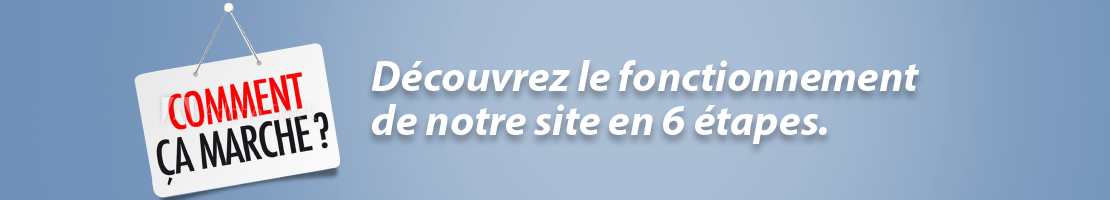
<style>
.page{position:relative;width:1110px;height:200px}
.page>*{position:absolute;margin:0}
.t1{font:43.2px/44.3px "MyriadPro-BoldIt";color:#ffffff}
</style>
<div class="page">
<p class="t1" style="left:371px;top:60px;width:549px;height:84px;text-align:justify">Découvrez le fonctionnement<br>de notre site en 6 étapes.</p>
</div>
